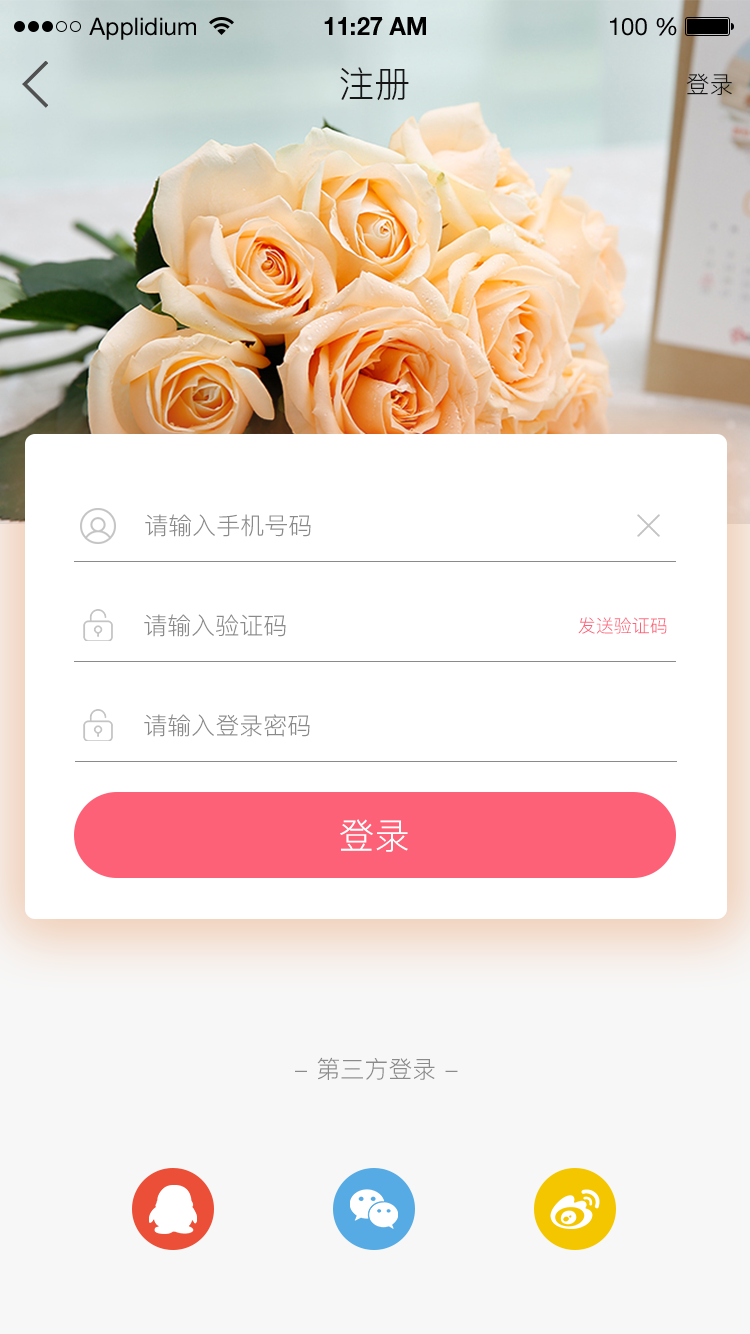
<style>
.page{position:relative;width:750px;height:1334px;background:#ffffff}
.page>*{position:absolute;margin:0}
.t1{font:24px "HelveticaNeueLTStd-Roman";color:#000000}
.t2{font:24px "HelveticaNeueLTStd-Bd";color:#000000}
.t3{font:36px "PingFang-SC-Regular";color:#151515}
.t4{font:24px "PingFang-SC-Regular";color:#151515}
.t5{font:24px "PingFang-SC-Regular";color:#8a8a8a}
.t6{font:18px "PingFang-SC-Regular";color:#fd6177}
.t7{font:36px "PingFang-SC-Regular";color:#ffffff}
</style>
<div class="page">
<p class="t1" style="left:89px;top:17px;width:107px;height:23px">Applidium</p>
<p class="t2" style="left:324px;top:17px;width:102px;height:18px">11:27 AM</p>
<p class="t1" style="left:610px;top:17px;width:67px;height:19px">100 %</p>
<p class="t3" style="left:340px;top:67px;width:69px;height:34px">注册</p>
<p class="t4" style="left:686px;top:73px;width:46px;height:22px">登录</p>
<p class="t5" style="left:145px;top:514px;width:166px;height:23px">请输入手机号码</p>
<p class="t5" style="left:144px;top:614px;width:142px;height:23px">请输入验证码</p>
<p class="t6" style="left:578px;top:617px;width:89px;height:17px">发送验证码</p>
<p class="t5" style="left:144px;top:714px;width:166px;height:23px">请输入登录密码</p>
<p class="t7" style="left:340px;top:819px;width:68px;height:33px">登录</p>
<p class="t5" style="left:295px;top:1057px;width:163px;height:23px">- 第三方登录 -</p>
</div>
